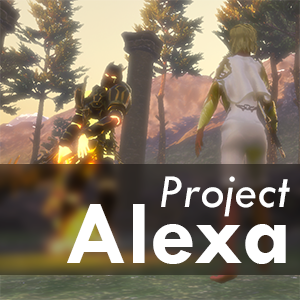
<style>
.page{position:relative;width:300px;height:300px}
.page>*{position:absolute;margin:0}
.t1{font:49.1px "TwCenMT-Italic";color:#ffffff}
.t2{font:91.5px "TwCenMT-Bold";color:#ffffff}
</style>
<div class="page">
<p class="t1" style="left:161px;top:176px;width:129px;height:41px">Project</p>
<p class="t2" style="left:67px;top:204px;width:219px;height:60px">Alexa</p>
</div>
